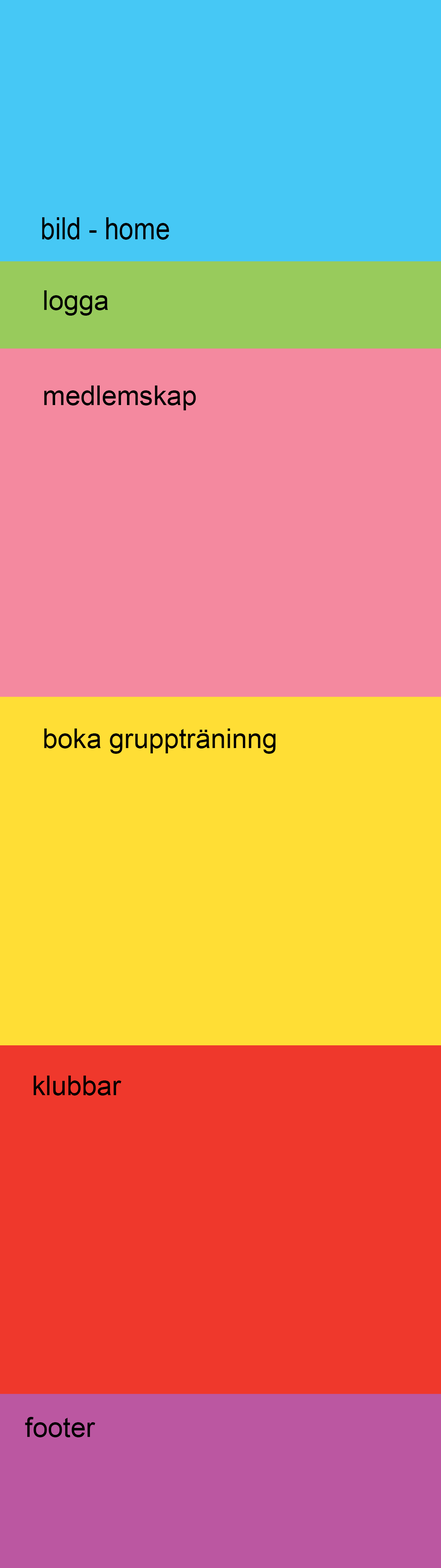
<style>
.page{position:relative;width:441px;height:1568px;background:#ffde35}
.page>*{position:absolute;margin:0}
.t1{font:30.6px "ArialMT";color:#000000;scale:0.86 1}
.t2{font:27.2px "ArialMT";color:#000000}
</style>
<div class="page">
<p class="t1" style="left:42px;top:217px;width:127px;height:23px">bild - home</p>
<p class="t2" style="left:44px;top:290px;width:64px;height:26px">logga</p>
<p class="t2" style="left:44px;top:385px;width:152px;height:25px">medlemskap</p>
<p class="t2" style="left:44px;top:728px;width:232px;height:26px">boka gruppträninng</p>
<p class="t2" style="left:33px;top:1076px;width:89px;height:20px">klubbar</p>
<p class="t2" style="left:25px;top:1417px;width:71px;height:20px">footer</p>
</div>
